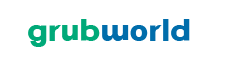
<style>
.page{position:relative;width:230px;height:60px;background:#ffffff}
.page>*{position:absolute;margin:0}
.t1{font:30px "ClementePDao-Heavy";color:#006dab}
.t2{font:30px "ClementePDao-Heavy";color:#00a978}
</style>
<div class="page">
<p class="t1" style="left:28px;top:19px;width:162px;height:28px"><span class="t2">grub</span>world</p>
</div>
